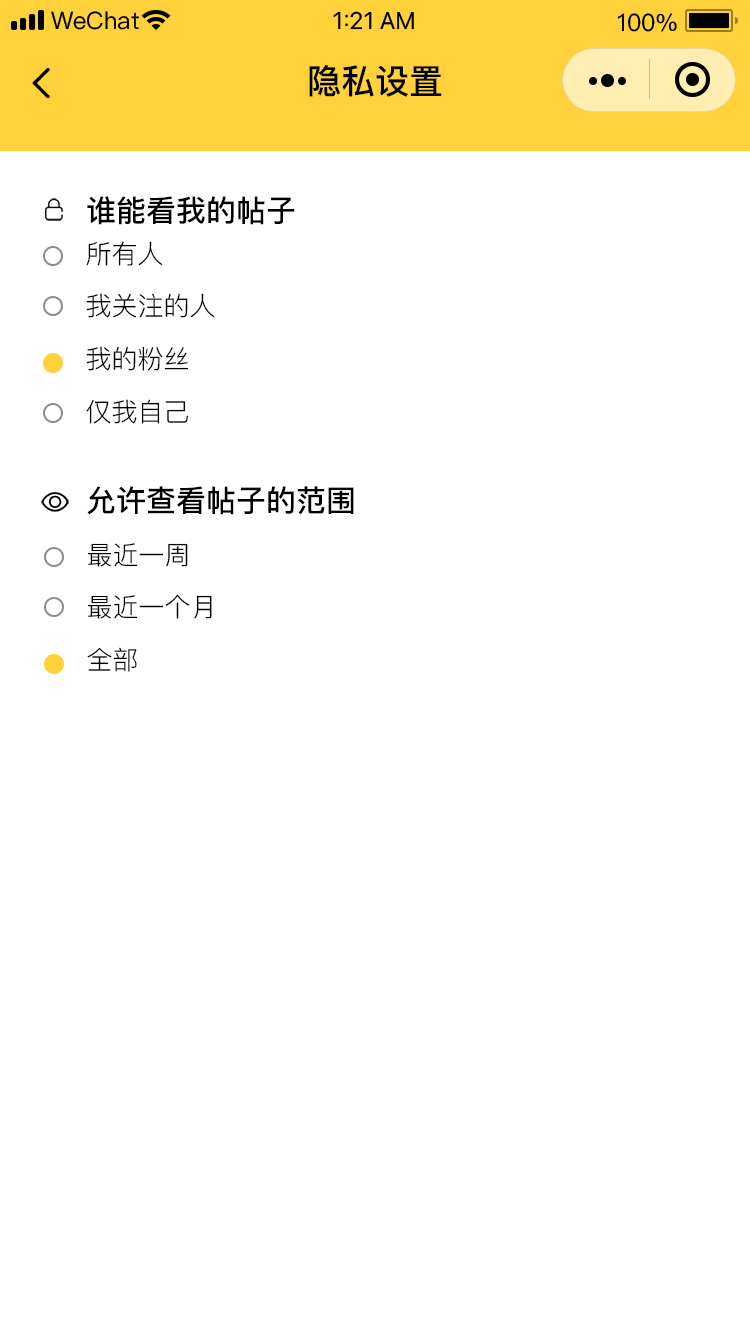
<style>
.page{position:relative;width:750px;height:1334px;background:#ffffff}
.page>*{position:absolute;margin:0}
.t1{font:34px "PingFang-SC-Bold";color:#000000}
.t2{font:30px "PingFang-SC-Bold";color:#000000}
.t3{font:26px/56.7px "PingFang-SC-Regular";color:#000000}
.t4{font:22px "PingFang-SC-Regular";color:#000000}
</style>
<div class="page">
<p class="t1" style="left:309px;top:65px;width:133px;height:32px">隐私设置</p>
<p class="t2" style="left:87px;top:196px;width:208px;height:29px">谁能看我的帖子</p>
<p class="t3" style="left:86px;top:241px;width:129px;height:183px"><span class="t4"><br></span>所有人<br>我关注的人<br>我的粉丝<br>仅我自己</p>
<p class="t2" style="left:87px;top:486px;width:267px;height:29px">允许查看帖子的范围</p>
<p class="t3" style="left:87px;top:543px;width:125px;height:129px"><span class="t4"><br></span>最近一周<br>最近一个月<br>全部</p>
</div>
